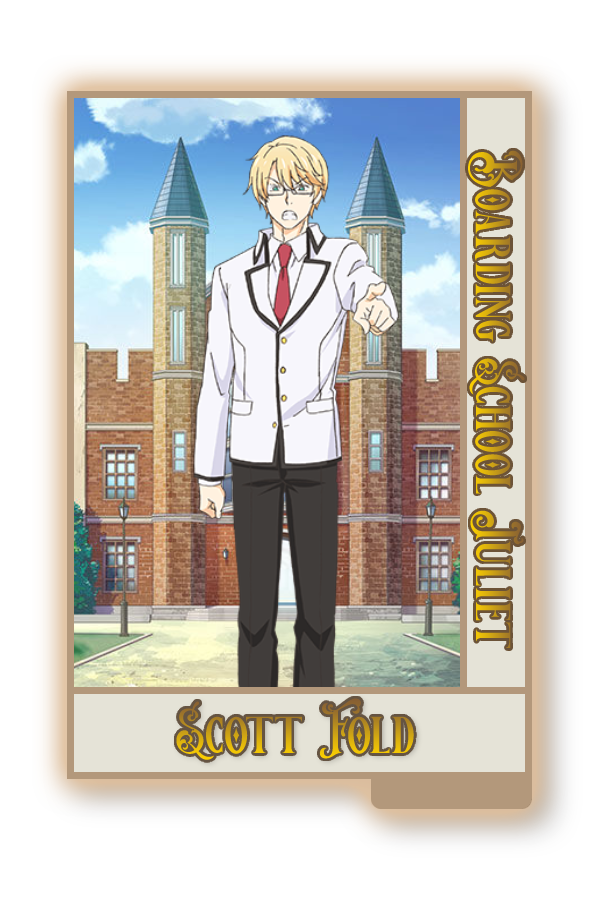
<style>
.page{position:relative;width:600px;height:900px;background:#ffffff}
.page>*{position:absolute;margin:0}
.t1{font:58.9px "VictorianDecadeDemoVersion"}
.t2{font:62.3px "VictorianDecadeDemoVersion"}
</style>
<div class="page">
<p class="t1" style="left:468px;top:150px;width:57px;height:498px;rotate:90deg">Boarding School Juliet</p>
<p class="t2" style="left:175px;top:698px;width:239px;height:62px">Scott Fold</p>
</div>
